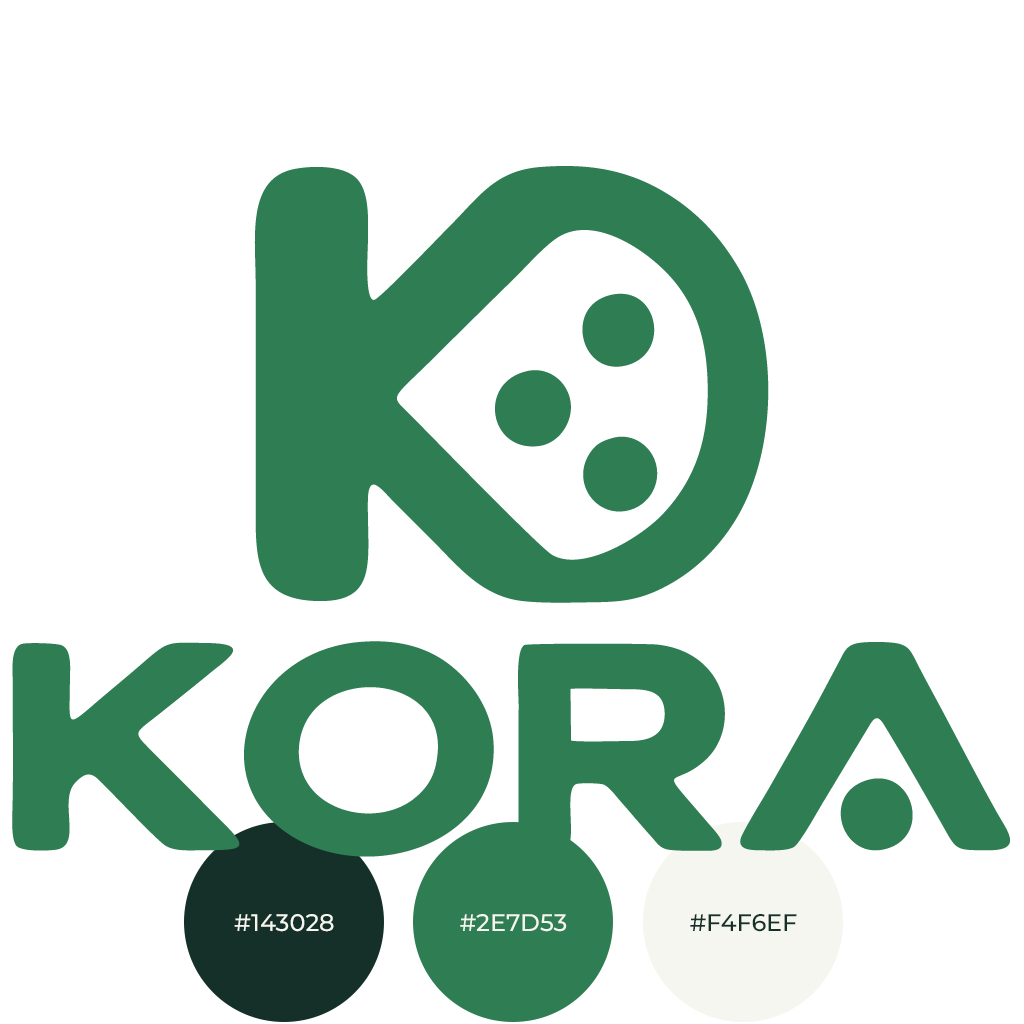
<style>
.page{position:relative;width:1024px;height:1024px;background:#ffffff}
.page>*{position:absolute;margin:0}
.t1{font:24px "Montserrat-Medium";color:#f4f6ef}
.t2{font:24px "Montserrat-Medium";color:#143028}
</style>
<div class="page">
<p class="t1" style="left:234px;top:914px;width:100px;height:18px">#143028</p>
<p class="t1" style="left:460px;top:914px;width:107px;height:18px">#2E7D53</p>
<p class="t2" style="left:690px;top:914px;width:107px;height:18px">#F4F6EF</p>
</div>
